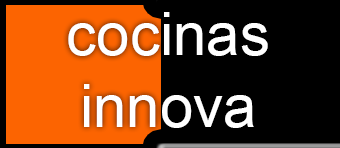
<style>
.page{position:relative;width:340px;height:148px;background:#000000}
.page>*{position:absolute;margin:0}
.t1{font:60px "ArialMT";color:#ffffff}
</style>
<div class="page">
<p class="t1" style="left:68px;top:12px;width:200px;height:116px;text-align:center">cocinas<br>innova</p>
</div>
